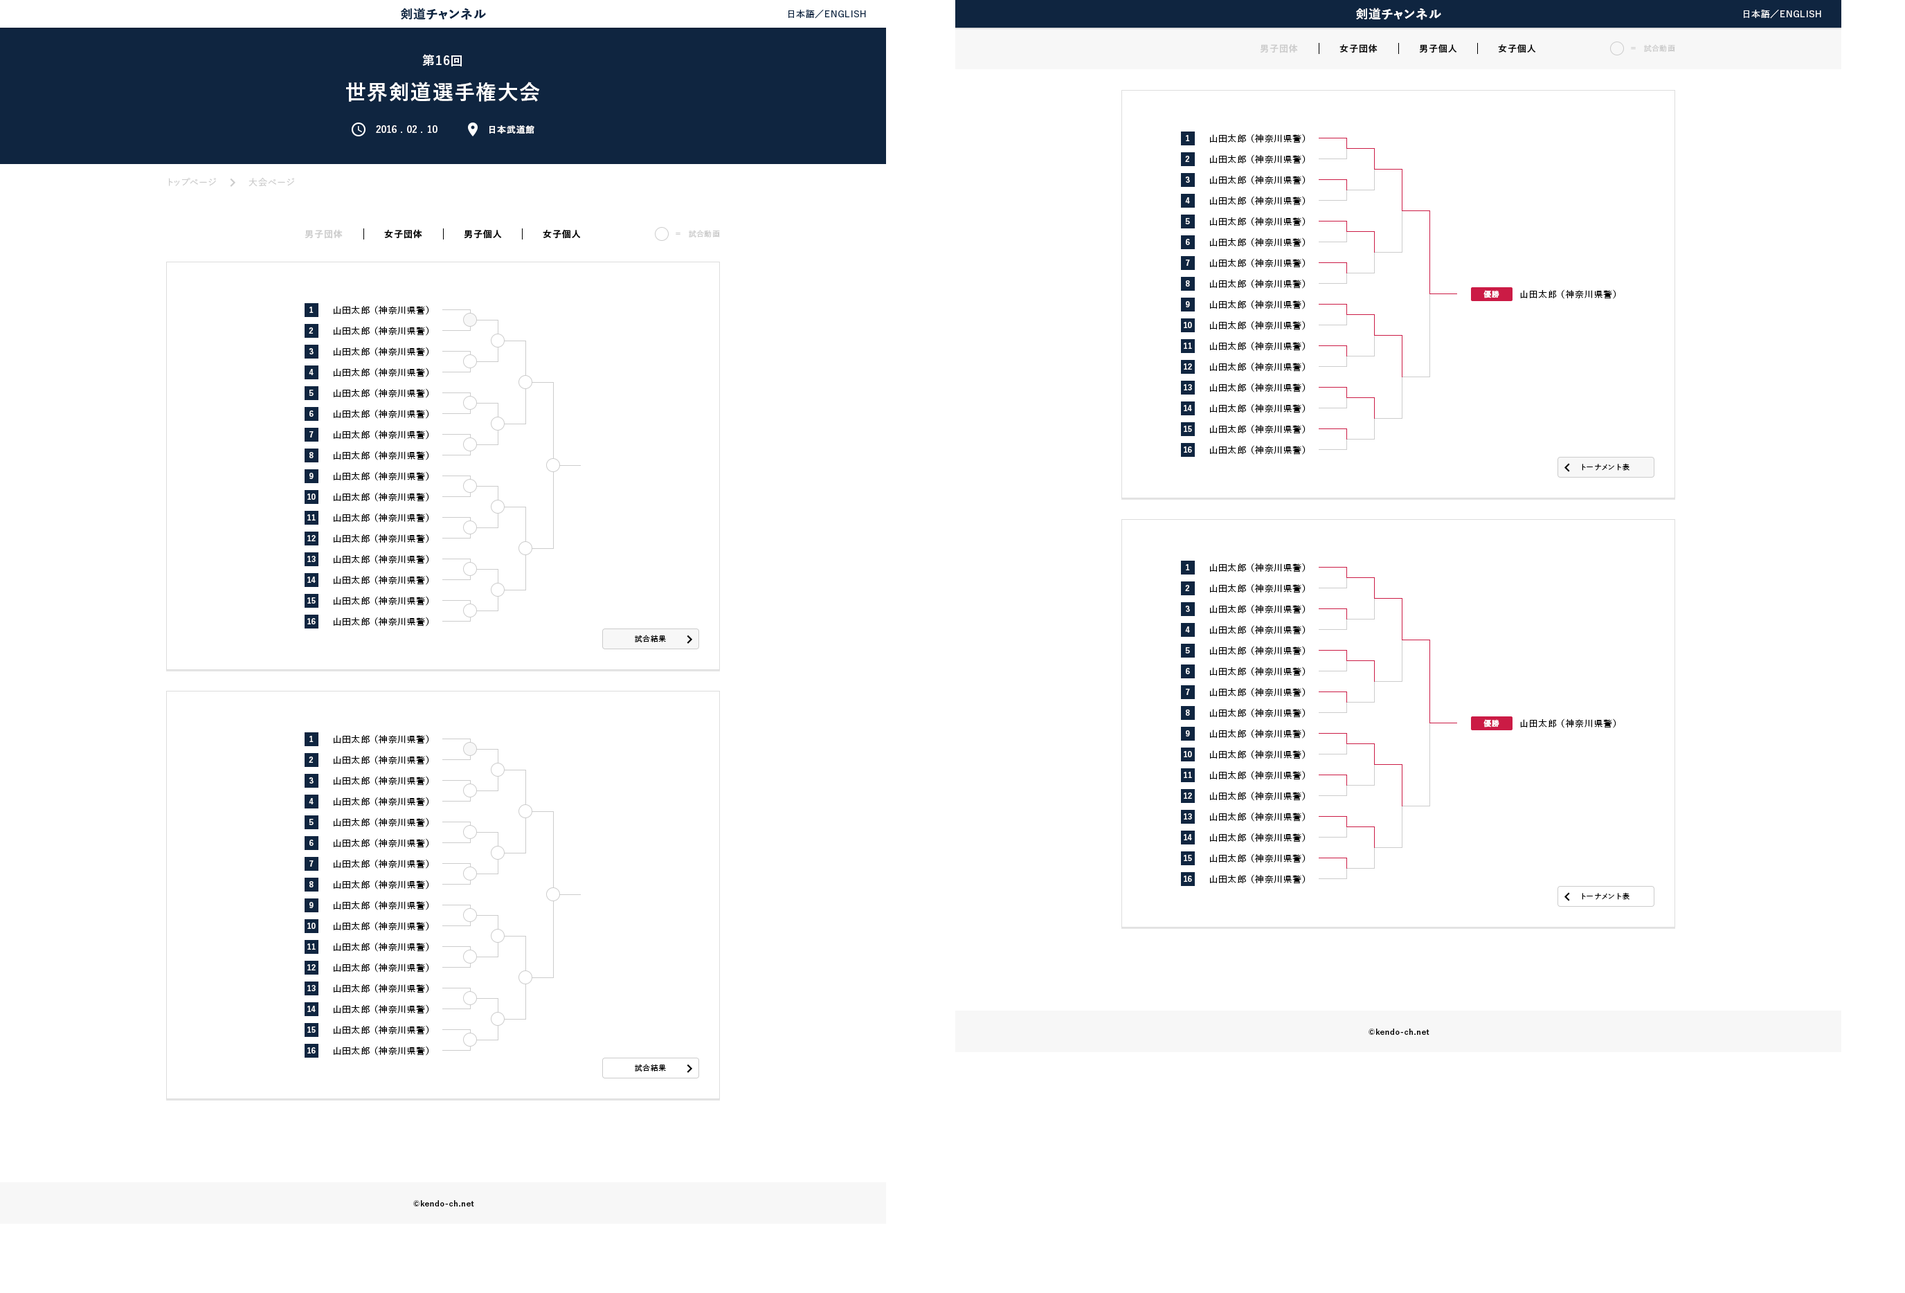
<style>
.page{position:relative;width:1905px;height:1293px;background:#ffffff}
.page>*{position:absolute;margin:0}
.t1{font:12.5px "YuGo-Bold";letter-spacing:0.05em;color:#0f2540}
.t2{font:9px "YuGo-Medium";letter-spacing:0.05em;color:#0f2540}
.t3{font:12.5px "YuGo-Bold";letter-spacing:0.05em;color:#ffffff}
.t4{font:9px "YuGo-Medium";letter-spacing:0.05em;color:#ffffff}
.t5{font:20.8px/34.6px "YuGo-Bold";letter-spacing:0.05em;color:#ffffff}
.t6{font:12.5px/34.6px "YuGo-Bold";letter-spacing:0.05em;color:#ffffff}
.t7{font:9px "YuGo-Bold";letter-spacing:0.05em;color:#cccccc}
.t8{font:9px "YuGo-Bold";letter-spacing:0.05em;color:#000000}
.t9{font:7.6px "YuGo-Medium";letter-spacing:0.05em;color:#cccccc}
.t10{font:9px "YuGo-Bold";letter-spacing:0.05em;color:#ffffff}
.t11{font:7.6px "YuGo-Bold";letter-spacing:0.05em;color:#ffffff}
.t12{font:9px "YuGo-Medium";letter-spacing:0.05em;color:#000000}
.t13{font:9px "YuGo-Medium";letter-spacing:0.05em;color:#cccccc}
.t14{font:7.6px "YuGo-Medium";letter-spacing:0.05em;color:#000000}
.t15{font:7.6px "YuGo-Bold";letter-spacing:0.05em;color:#000000}
</style>
<div class="page">
<p class="t1" style="left:401px;top:8px;width:85px;height:12px">剣道チャンネル</p>
<p class="t2" style="left:789px;top:10px;width:77px;height:9px">日本語／ENGLISH</p>
<p class="t3" style="left:1356px;top:8px;width:85px;height:12px">剣道チャンネル</p>
<p class="t4" style="left:1744px;top:10px;width:77px;height:9px">日本語／ENGLISH</p>
<p class="t5" style="left:346px;top:54px;width:194px;height:48px;text-align:center"><span class="t6">第16回<br></span>世界剣道選手権大会</p>
<p class="t7" style="left:1260px;top:44px;width:38px;height:9px">男子団体</p>
<p class="t8" style="left:1340px;top:44px;width:38px;height:9px">女子団体</p>
<p class="t8" style="left:1419px;top:44px;width:38px;height:9px">男子個人</p>
<p class="t8" style="left:1498px;top:44px;width:38px;height:9px">女子個人</p>
<p class="t9" style="left:1631px;top:47px;width:5px;height:2px">＝</p>
<p class="t9" style="left:1644px;top:44px;width:31px;height:8px">試合動画</p>
<p class="t10" style="left:376px;top:125px;width:62px;height:8px">2016 . 02 . 10</p>
<p class="t10" style="left:489px;top:125px;width:45px;height:9px">日本武道館</p>
<p class="t11" style="left:1186px;top:135px;width:4px;height:6px">1</p>
<p class="t12" style="left:1210px;top:134px;width:96px;height:9px">山田太郎 （神奈川県警）</p>
<p class="t11" style="left:1185px;top:156px;width:4px;height:6px">2</p>
<p class="t12" style="left:1210px;top:154px;width:96px;height:10px">山田太郎 （神奈川県警）</p>
<p class="t13" style="left:168px;top:178px;width:48px;height:8px">トップページ</p>
<p class="t13" style="left:249px;top:177px;width:45px;height:9px">大会ページ</p>
<p class="t11" style="left:1185px;top:177px;width:5px;height:6px">3</p>
<p class="t12" style="left:1210px;top:175px;width:96px;height:10px">山田太郎 （神奈川県警）</p>
<p class="t11" style="left:1185px;top:197px;width:5px;height:7px">4</p>
<p class="t12" style="left:1210px;top:196px;width:96px;height:10px">山田太郎 （神奈川県警）</p>
<p class="t11" style="left:1185px;top:218px;width:5px;height:6px">5</p>
<p class="t12" style="left:1210px;top:217px;width:96px;height:9px">山田太郎 （神奈川県警）</p>
<p class="t7" style="left:305px;top:229px;width:38px;height:10px">男子団体</p>
<p class="t8" style="left:384px;top:229px;width:38px;height:10px">女子団体</p>
<p class="t8" style="left:464px;top:230px;width:38px;height:9px">男子個人</p>
<p class="t8" style="left:543px;top:230px;width:38px;height:9px">女子個人</p>
<p class="t9" style="left:676px;top:233px;width:5px;height:2px">＝</p>
<p class="t9" style="left:689px;top:230px;width:31px;height:7px">試合動画</p>
<p class="t11" style="left:1186px;top:239px;width:4px;height:6px">6</p>
<p class="t12" style="left:1210px;top:237px;width:96px;height:10px">山田太郎 （神奈川県警）</p>
<p class="t11" style="left:1186px;top:260px;width:4px;height:6px">7</p>
<p class="t12" style="left:1210px;top:258px;width:96px;height:10px">山田太郎 （神奈川県警）</p>
<p class="t11" style="left:1186px;top:280px;width:4px;height:7px">8</p>
<p class="t12" style="left:1210px;top:279px;width:96px;height:10px">山田太郎 （神奈川県警）</p>
<p class="t11" style="left:1484px;top:290px;width:16px;height:8px">優勝</p>
<p class="t12" style="left:1520px;top:289px;width:97px;height:10px">山田太郎 （神奈川県警）</p>
<p class="t12" style="left:334px;top:305px;width:95px;height:10px">山田太郎 （神奈川県警）</p>
<p class="t11" style="left:1186px;top:301px;width:4px;height:6px">9</p>
<p class="t12" style="left:1210px;top:300px;width:96px;height:9px">山田太郎 （神奈川県警）</p>
<p class="t11" style="left:309px;top:307px;width:5px;height:6px">1</p>
<p class="t11" style="left:309px;top:327px;width:4px;height:7px">2</p>
<p class="t12" style="left:334px;top:326px;width:95px;height:10px">山田太郎 （神奈川県警）</p>
<p class="t11" style="left:1184px;top:322px;width:8px;height:6px">10</p>
<p class="t12" style="left:1210px;top:321px;width:96px;height:9px">山田太郎 （神奈川県警）</p>
<p class="t12" style="left:1210px;top:341px;width:96px;height:10px">山田太郎 （神奈川県警）</p>
<p class="t11" style="left:309px;top:348px;width:5px;height:6px">3</p>
<p class="t12" style="left:334px;top:347px;width:95px;height:10px">山田太郎 （神奈川県警）</p>
<p class="t11" style="left:1184px;top:343px;width:8px;height:6px">11</p>
<p class="t11" style="left:1184px;top:363px;width:8px;height:7px">12</p>
<p class="t12" style="left:1210px;top:362px;width:96px;height:10px">山田太郎 （神奈川県警）</p>
<p class="t11" style="left:309px;top:369px;width:5px;height:6px">4</p>
<p class="t12" style="left:334px;top:368px;width:95px;height:9px">山田太郎 （神奈川県警）</p>
<p class="t11" style="left:309px;top:390px;width:5px;height:6px">5</p>
<p class="t12" style="left:334px;top:388px;width:95px;height:10px">山田太郎 （神奈川県警）</p>
<p class="t11" style="left:1184px;top:384px;width:8px;height:6px">13</p>
<p class="t12" style="left:1210px;top:383px;width:96px;height:10px">山田太郎 （神奈川県警）</p>
<p class="t11" style="left:309px;top:411px;width:5px;height:6px">6</p>
<p class="t12" style="left:334px;top:409px;width:95px;height:10px">山田太郎 （神奈川県警）</p>
<p class="t11" style="left:1184px;top:405px;width:8px;height:6px">14</p>
<p class="t12" style="left:1210px;top:404px;width:96px;height:9px">山田太郎 （神奈川県警）</p>
<p class="t11" style="left:1184px;top:426px;width:8px;height:6px">15</p>
<p class="t12" style="left:1210px;top:424px;width:96px;height:10px">山田太郎 （神奈川県警）</p>
<p class="t11" style="left:309px;top:431px;width:5px;height:7px">7</p>
<p class="t12" style="left:334px;top:430px;width:95px;height:10px">山田太郎 （神奈川県警）</p>
<p class="t11" style="left:1184px;top:447px;width:8px;height:6px">16</p>
<p class="t12" style="left:1210px;top:445px;width:96px;height:10px">山田太郎 （神奈川県警）</p>
<p class="t11" style="left:309px;top:452px;width:5px;height:6px">8</p>
<p class="t12" style="left:334px;top:451px;width:95px;height:9px">山田太郎 （神奈川県警）</p>
<p class="t11" style="left:309px;top:473px;width:5px;height:6px">9</p>
<p class="t12" style="left:334px;top:471px;width:95px;height:10px">山田太郎 （神奈川県警）</p>
<p class="t14" style="left:1582px;top:463px;width:48px;height:8px">トーナメント表</p>
<p class="t11" style="left:307px;top:494px;width:9px;height:6px">10</p>
<p class="t12" style="left:334px;top:492px;width:95px;height:10px">山田太郎 （神奈川県警）</p>
<p class="t11" style="left:307px;top:514px;width:9px;height:7px">11</p>
<p class="t12" style="left:334px;top:513px;width:95px;height:10px">山田太郎 （神奈川県警）</p>
<p class="t12" style="left:334px;top:534px;width:95px;height:9px">山田太郎 （神奈川県警）</p>
<p class="t11" style="left:307px;top:535px;width:9px;height:6px">12</p>
<p class="t11" style="left:307px;top:556px;width:9px;height:6px">13</p>
<p class="t12" style="left:334px;top:555px;width:95px;height:9px">山田太郎 （神奈川県警）</p>
<p class="t11" style="left:1186px;top:564px;width:4px;height:6px">1</p>
<p class="t12" style="left:1210px;top:563px;width:96px;height:10px">山田太郎 （神奈川県警）</p>
<p class="t11" style="left:307px;top:577px;width:9px;height:6px">14</p>
<p class="t12" style="left:334px;top:575px;width:95px;height:10px">山田太郎 （神奈川県警）</p>
<p class="t11" style="left:1185px;top:585px;width:4px;height:6px">2</p>
<p class="t12" style="left:1210px;top:584px;width:96px;height:9px">山田太郎 （神奈川県警）</p>
<p class="t11" style="left:307px;top:597px;width:9px;height:7px">15</p>
<p class="t12" style="left:334px;top:596px;width:95px;height:10px">山田太郎 （神奈川県警）</p>
<p class="t11" style="left:1185px;top:606px;width:5px;height:6px">3</p>
<p class="t12" style="left:1210px;top:604px;width:96px;height:10px">山田太郎 （神奈川県警）</p>
<p class="t12" style="left:334px;top:617px;width:95px;height:10px">山田太郎 （神奈川県警）</p>
<p class="t11" style="left:307px;top:618px;width:9px;height:6px">16</p>
<p class="t11" style="left:1185px;top:627px;width:5px;height:6px">4</p>
<p class="t12" style="left:1210px;top:625px;width:96px;height:10px">山田太郎 （神奈川県警）</p>
<p class="t14" style="left:635px;top:635px;width:31px;height:7px">試合結果</p>
<p class="t11" style="left:1185px;top:647px;width:5px;height:7px">5</p>
<p class="t12" style="left:1210px;top:646px;width:96px;height:10px">山田太郎 （神奈川県警）</p>
<p class="t11" style="left:1186px;top:668px;width:4px;height:6px">6</p>
<p class="t12" style="left:1210px;top:667px;width:96px;height:9px">山田太郎 （神奈川県警）</p>
<p class="t11" style="left:1186px;top:689px;width:4px;height:6px">7</p>
<p class="t12" style="left:1210px;top:687px;width:96px;height:10px">山田太郎 （神奈川県警）</p>
<p class="t11" style="left:1186px;top:710px;width:4px;height:6px">8</p>
<p class="t12" style="left:1210px;top:708px;width:96px;height:10px">山田太郎 （神奈川県警）</p>
<p class="t11" style="left:1484px;top:719px;width:16px;height:9px">優勝</p>
<p class="t12" style="left:1520px;top:719px;width:97px;height:9px">山田太郎 （神奈川県警）</p>
<p class="t11" style="left:309px;top:736px;width:5px;height:6px">1</p>
<p class="t12" style="left:334px;top:735px;width:95px;height:9px">山田太郎 （神奈川県警）</p>
<p class="t11" style="left:1186px;top:730px;width:4px;height:7px">9</p>
<p class="t12" style="left:1210px;top:729px;width:96px;height:10px">山田太郎 （神奈川県警）</p>
<p class="t12" style="left:1210px;top:750px;width:96px;height:9px">山田太郎 （神奈川県警）</p>
<p class="t11" style="left:309px;top:757px;width:4px;height:6px">2</p>
<p class="t12" style="left:334px;top:755px;width:95px;height:10px">山田太郎 （神奈川県警）</p>
<p class="t11" style="left:1184px;top:751px;width:8px;height:6px">10</p>
<p class="t11" style="left:1184px;top:772px;width:8px;height:6px">11</p>
<p class="t12" style="left:1210px;top:771px;width:96px;height:9px">山田太郎 （神奈川県警）</p>
<p class="t11" style="left:309px;top:777px;width:5px;height:7px">3</p>
<p class="t12" style="left:334px;top:776px;width:95px;height:10px">山田太郎 （神奈川県警）</p>
<p class="t12" style="left:334px;top:797px;width:95px;height:10px">山田太郎 （神奈川県警）</p>
<p class="t11" style="left:1184px;top:793px;width:8px;height:6px">12</p>
<p class="t12" style="left:1210px;top:791px;width:96px;height:10px">山田太郎 （神奈川県警）</p>
<p class="t11" style="left:309px;top:798px;width:5px;height:6px">4</p>
<p class="t11" style="left:309px;top:819px;width:5px;height:6px">5</p>
<p class="t12" style="left:334px;top:818px;width:95px;height:9px">山田太郎 （神奈川県警）</p>
<p class="t11" style="left:1184px;top:813px;width:8px;height:7px">13</p>
<p class="t12" style="left:1210px;top:812px;width:96px;height:10px">山田太郎 （神奈川県警）</p>
<p class="t12" style="left:1210px;top:833px;width:96px;height:10px">山田太郎 （神奈川県警）</p>
<p class="t11" style="left:309px;top:840px;width:5px;height:6px">6</p>
<p class="t12" style="left:334px;top:838px;width:95px;height:10px">山田太郎 （神奈川県警）</p>
<p class="t11" style="left:1184px;top:834px;width:8px;height:6px">14</p>
<p class="t11" style="left:1184px;top:855px;width:8px;height:6px">15</p>
<p class="t12" style="left:1210px;top:854px;width:96px;height:9px">山田太郎 （神奈川県警）</p>
<p class="t11" style="left:309px;top:861px;width:5px;height:6px">7</p>
<p class="t12" style="left:334px;top:859px;width:95px;height:10px">山田太郎 （神奈川県警）</p>
<p class="t11" style="left:309px;top:881px;width:5px;height:7px">8</p>
<p class="t12" style="left:334px;top:880px;width:95px;height:10px">山田太郎 （神奈川県警）</p>
<p class="t11" style="left:1184px;top:876px;width:8px;height:6px">16</p>
<p class="t12" style="left:1210px;top:874px;width:96px;height:10px">山田太郎 （神奈川県警）</p>
<p class="t14" style="left:1582px;top:892px;width:48px;height:8px">トーナメント表</p>
<p class="t11" style="left:309px;top:902px;width:5px;height:6px">9</p>
<p class="t12" style="left:334px;top:901px;width:95px;height:9px">山田太郎 （神奈川県警）</p>
<p class="t11" style="left:307px;top:923px;width:9px;height:6px">10</p>
<p class="t12" style="left:334px;top:921px;width:95px;height:10px">山田太郎 （神奈川県警）</p>
<p class="t11" style="left:307px;top:944px;width:9px;height:6px">11</p>
<p class="t12" style="left:334px;top:942px;width:95px;height:10px">山田太郎 （神奈川県警）</p>
<p class="t11" style="left:307px;top:964px;width:9px;height:7px">12</p>
<p class="t12" style="left:334px;top:963px;width:95px;height:10px">山田太郎 （神奈川県警）</p>
<p class="t11" style="left:307px;top:985px;width:9px;height:6px">13</p>
<p class="t12" style="left:334px;top:984px;width:95px;height:9px">山田太郎 （神奈川県警）</p>
<p class="t11" style="left:307px;top:1006px;width:9px;height:6px">14</p>
<p class="t12" style="left:334px;top:1005px;width:95px;height:9px">山田太郎 （神奈川県警）</p>
<p class="t12" style="left:334px;top:1025px;width:95px;height:10px">山田太郎 （神奈川県警）</p>
<p class="t11" style="left:307px;top:1027px;width:9px;height:6px">15</p>
<p class="t15" style="left:1369px;top:1029px;width:61px;height:6px">©kendo-ch.net</p>
<p class="t11" style="left:307px;top:1047px;width:9px;height:7px">16</p>
<p class="t12" style="left:334px;top:1046px;width:95px;height:10px">山田太郎 （神奈川県警）</p>
<p class="t14" style="left:635px;top:1064px;width:31px;height:8px">試合結果</p>
<p class="t15" style="left:413px;top:1200px;width:61px;height:7px">©kendo-ch.net</p>
</div>
